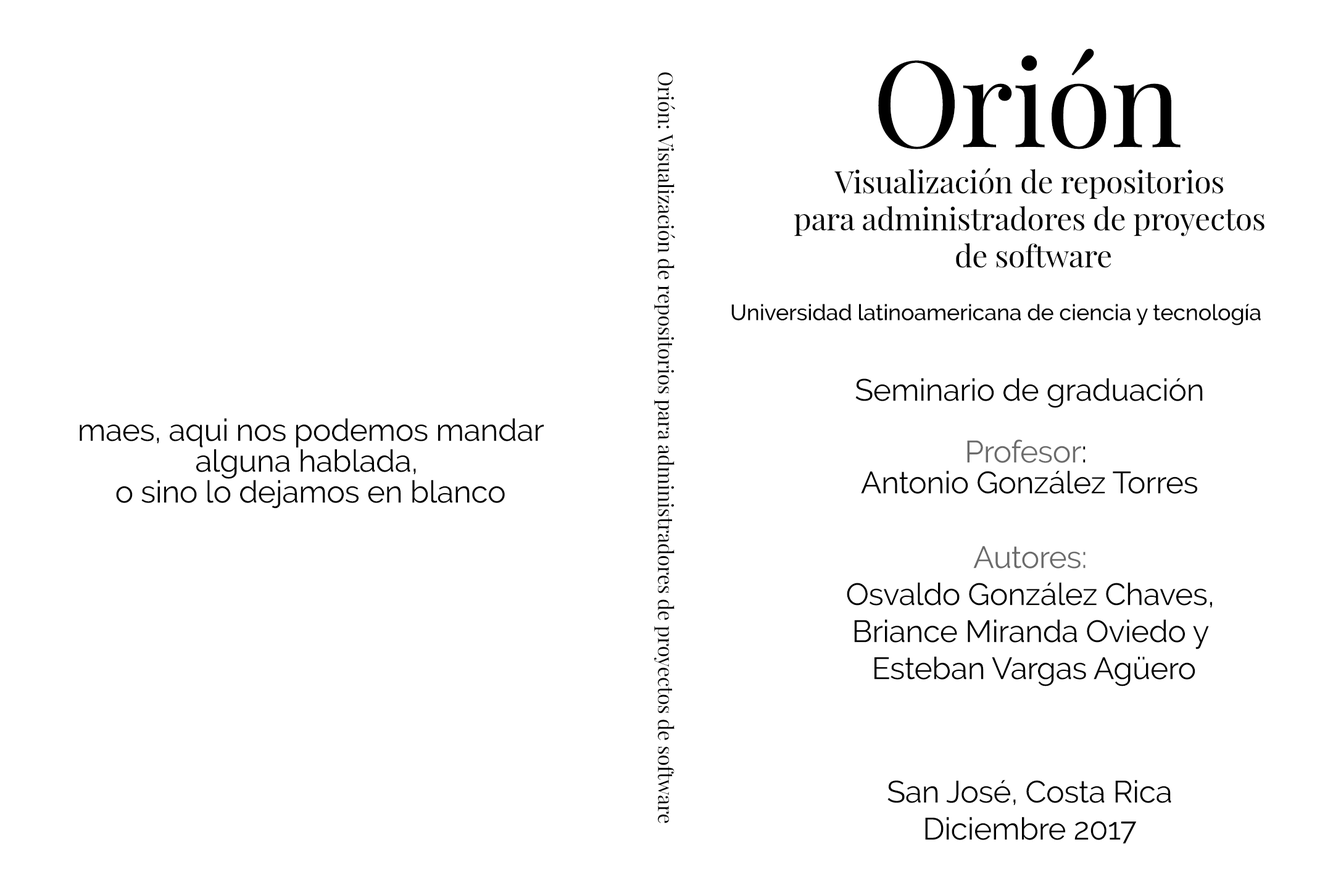
<style>
.page{position:relative;width:1333px;height:895px;background:#ffffff}
.page>*{position:absolute;margin:0}
.t1{font:120px "PlayfairDisplay-Regular";letter-spacing:-0.01em;color:#000000}
.t2{font:20.6px "PlayfairDisplay-Regular";letter-spacing:-0.01em;color:#000000}
.t3{font:30.9px "PlayfairDisplay-Regular";letter-spacing:-0.01em;color:#000000}
.t4{font:22.3px "Raleway-Medium";letter-spacing:-0.01em;color:#000000}
.t5{font:30.9px/30.9px "Raleway-Regular";letter-spacing:-0.01em;color:#000000}
.t6{font:30.9px/24px "Raleway-Regular";letter-spacing:-0.01em;color:#000000}
.t7{font:30.9px/30.9px "Raleway-Regular";letter-spacing:-0.01em;color:#6b6b6b}
.t8{font:30.9px "Raleway-Regular";letter-spacing:-0.01em;color:#000000}
.t9{font:30.9px "Raleway-Regular";letter-spacing:-0.01em;color:#6b6b6b}
</style>
<div class="page">
<p class="t1" style="left:878px;top:49px;width:302px;height:100px">Orión</p>
<p class="t2" style="left:654px;top:72px;width:21px;height:751px;rotate:90deg">Orión: Visualización de repositorios para administradores de proyectos de software</p>
<p class="t3" style="left:794px;top:168px;width:470px;height:100px;text-align:center">Visualización de repositorios <br>para administradores de proyectos <br>de software</p>
<p class="t4" style="left:731px;top:304px;width:530px;height:21px">Universidad latinoamericana de ciencia y tecnología</p>
<p class="t5" style="left:855px;top:378px;width:348px;height:116px;text-align:center"><span class="t6">Seminario de graduación<br><br></span><span class="t7">Profesor</span>: <br>Antonio González Torres</p>
<p class="t5" style="left:80px;top:418px;width:464px;height:90px;text-align:center">maes, aqui nos podemos mandar<br>alguna hablada, <br>o sino lo dejamos en blanco</p>
<p class="t8" style="left:847px;top:545px;width:365px;height:141px;text-align:center"><span class="t9">Autores: <br></span>Osvaldo González Chaves, <br>Briance Miranda Oviedo y <br>Esteban Vargas Agüero</p>
<p class="t8" style="left:887px;top:779px;width:284px;height:64px;text-align:center">San José, Costa Rica<br>Diciembre 2017</p>
</div>
